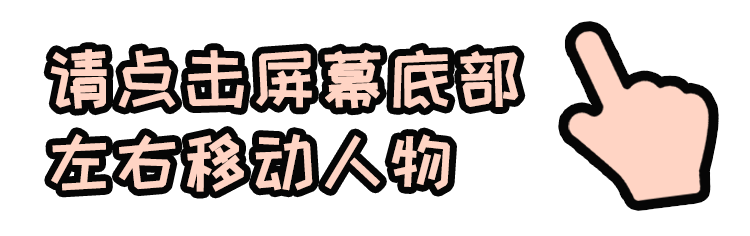
<style>
.page{position:relative;width:750px;height:236px;background:#ffffff}
.page>*{position:absolute;margin:0}
.t1{font:66.5px/83.1px "HappyZcool-2016";color:#ffd4c4;font-weight:bold}
</style>
<div class="page">
<p class="t1" style="left:50px;top:49px;width:469px;height:143px">请点击屏幕底部<br>左右移动人物</p>
</div>
